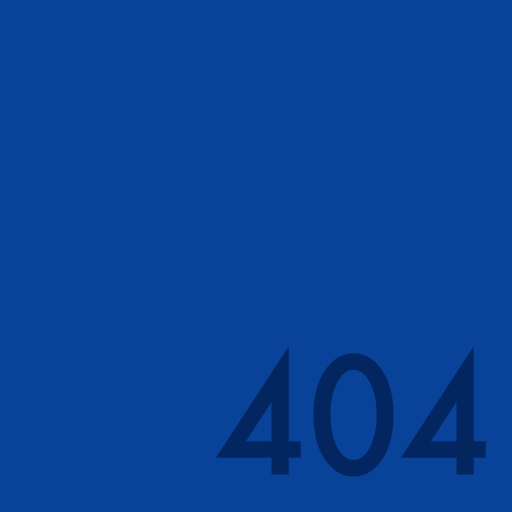
<style>
.page{position:relative;width:512px;height:512px;background:#084299}
.page>*{position:absolute;margin:0}
.t1{font:157.7px "Futura-Medium";color:#032660;scale:0.95 1}
</style>
<div class="page">
<p class="t1" style="left:216px;top:346px;width:270px;height:131px">404</p>
</div>
